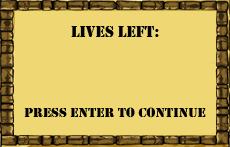
<style>
.page{position:relative;width:230px;height:147px;background:#efd774}
.page>*{position:absolute;margin:0}
.t1{font:16px "Stencil";color:#000000}
.t2{font:14px "Stencil";color:#000000}
</style>
<div class="page">
<p class="t1" style="left:71px;top:26px;width:88px;height:11px">Lives Left:</p>
<p class="t2" style="left:24px;top:107px;width:182px;height:11px">Press Enter To Continue</p>
</div>
